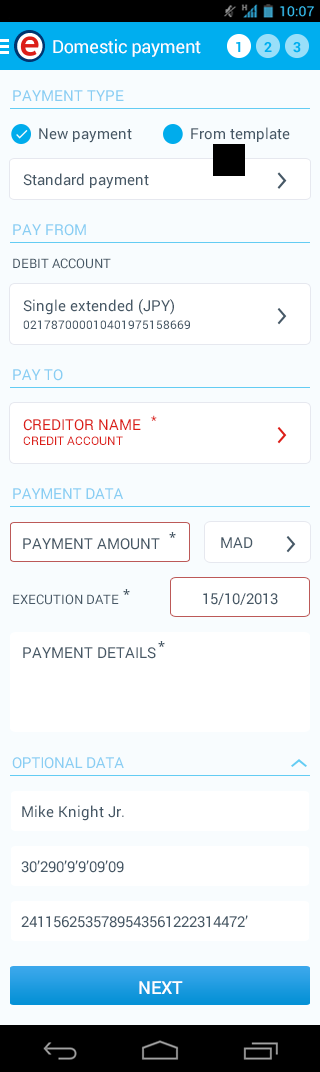
<style>
.page{position:relative;width:320px;height:1072px;background:#f8fcfe}
.page>*{position:absolute;margin:0}
.t1{font:18px "Roboto-Regular";letter-spacing:-0.015em;color:#ffffff}
.t2{font:15px "Roboto-Regular";color:#89cef3}
.t3{font:15px "Roboto-Regular";color:#465866}
.t4{font:13px "Roboto-Regular";color:#465866}
.t5{font:12px/18px "Roboto-Regular";color:#465866}
.t6{font:15px/18px "Roboto-Regular";color:#465866}
.t7{font:15px "Roboto-Regular";letter-spacing:-0.015em;color:#89cef3}
.t8{font:12px/14.4px "Roboto-Regular";color:#dc1e18}
.t9{font:15px/18px "Roboto-Regular";color:#dc1e18}
.t10{font:13px "Roboto-Regular";letter-spacing:-0.02em;color:#dc1e18}
.t11{font:13px "OpenSans-Semibold";letter-spacing:-0.02em;color:#465866}
.t12{font:18px "Roboto-Medium";color:#ffffff}
</style>
<div class="page">
<p class="t1" style="left:53px;top:39px;width:148px;height:18px">Domestic payment</p>
<p class="t2" style="left:13px;top:90px;width:111px;height:11px">PAYMENT TYPE</p>
<p class="t3" style="left:39px;top:128px;width:93px;height:15px">New payment</p>
<p class="t3" style="left:191px;top:127px;width:99px;height:15px">From template</p>
<p class="t3" style="left:23px;top:173px;width:126px;height:16px">Standard payment</p>
<p class="t2" style="left:13px;top:224px;width:73px;height:12px">PAY FROM</p>
<p class="t4" style="left:13px;top:258px;width:98px;height:11px">DEBIT ACCOUNT</p>
<p class="t5" style="left:23px;top:299px;width:167px;height:30px"><span class="t6">Single extended (JPY)<br></span>021787000010401975158669</p>
<p class="t7" style="left:13px;top:369px;width:50px;height:12px">PAY TO</p>
<p class="t8" style="left:23px;top:419px;width:118px;height:26px"><span class="t9">CREDITOR NAME<br></span>CREDIT ACCOUNT</p>
<p class="t10" style="left:151px;top:415px;width:6px;height:6px">*</p>
<p class="t7" style="left:13px;top:488px;width:110px;height:11px">PAYMENT DATA</p>
<p class="t11" style="left:169px;top:532px;width:7px;height:6px">*</p>
<p class="t3" style="left:23px;top:538px;width:137px;height:12px">PAYMENT AMOUNT</p>
<p class="t3" style="left:221px;top:537px;width:32px;height:11px">MAD</p>
<p class="t11" style="left:123px;top:589px;width:7px;height:6px">*</p>
<p class="t3" style="left:203px;top:593px;width:75px;height:12px">15/10/2013</p>
<p class="t4" style="left:13px;top:594px;width:106px;height:11px">EXECUTION DATE</p>
<p class="t11" style="left:158px;top:641px;width:7px;height:6px">*</p>
<p class="t3" style="left:23px;top:647px;width:133px;height:12px">PAYMENT DETAILS</p>
<p class="t7" style="left:12px;top:757px;width:112px;height:12px">OPTIONAL DATA</p>
<p class="t3" style="left:22px;top:805px;width:102px;height:16px">Mike Knight Jr.</p>
<p class="t3" style="left:21px;top:860px;width:103px;height:13px">30’290’9’9’09’09</p>
<p class="t3" style="left:21px;top:915px;width:227px;height:13px">2411562535789543561222314472’</p>
<p class="t12" style="left:139px;top:981px;width:44px;height:13px">NEXT</p>
</div>
